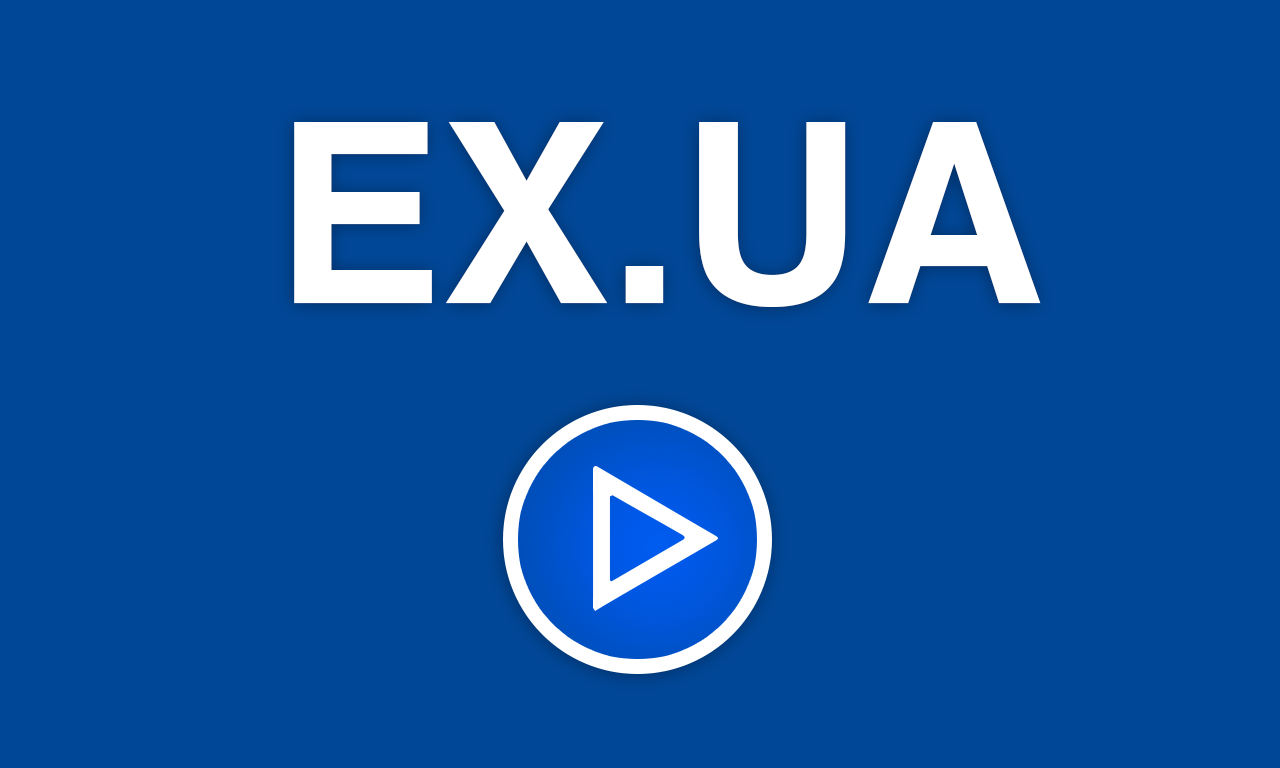
<style>
.page{position:relative;width:1280px;height:768px;background:#014797}
.page>*{position:absolute;margin:0}
.t1{font:252.1px "Helvetica-Bold";color:#ffffff}
</style>
<div class="page">
<p class="t1" style="left:294px;top:122px;width:747px;height:185px">EX.UA</p>
</div>
